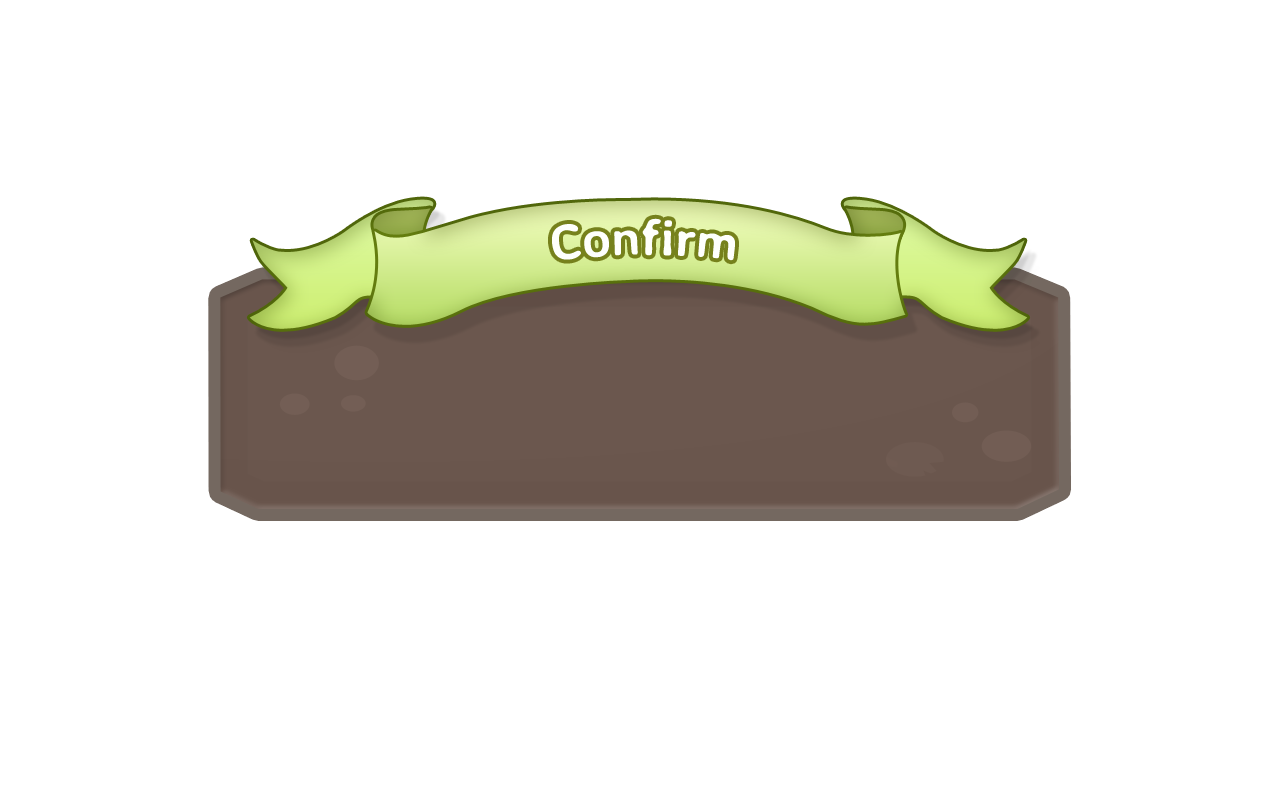
<style>
.page{position:relative;width:1280px;height:800px;background:#ffffff}
.page>*{position:absolute;margin:0}
.t1{font:50px "AveriaSansLibre-Bold";color:#fefffc}
</style>
<div class="page">
<p class="t1" style="left:552px;top:218px;width:183px;height:43px">Confirm</p>
</div>
